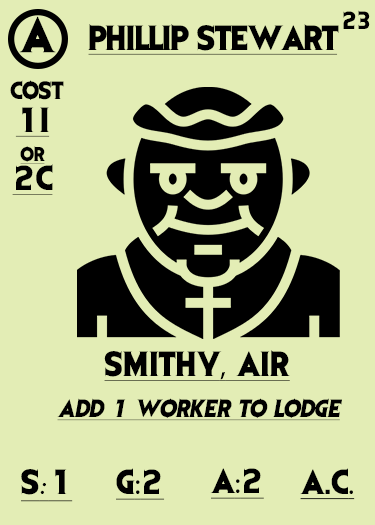
<style>
.page{position:relative;width:375px;height:525px;background:#e3edb5}
.page>*{position:absolute;margin:0}
.t1{font:41.7px "EvilDead";letter-spacing:-0.05em;color:#000000}
.t2{font:20.8px "EvilDead";letter-spacing:-0.1em;color:#000000}
.t3{font:29.2px "EvilDead";letter-spacing:-0.025em;color:#000000;text-decoration:underline}
.t4{font:20.8px "EvilDead";color:#000000}
.t5{font:29.2px/29.2px "EvilDead";color:#000000;text-decoration:underline}
.t6{font:16.7px/29.2px "EvilDead";color:#000000;text-decoration:underline}
.t7{font:29.2px "EvilDead";color:#000000;text-decoration:underline}
.t8{font:29.2px "MyriadPro-Regular";color:#000000;text-decoration:underline}
.t9{font:20.8px "EvilDead";color:#000000;font-style:italic;text-decoration:underline}
.t10{font:29.2px "Fadli-Script";color:#000000;text-decoration:underline}
</style>
<div class="page">
<p class="t1" style="left:19px;top:16px;width:37px;height:37px">A</p>
<p class="t2" style="left:343px;top:10px;width:27px;height:19px">23</p>
<p class="t3" style="left:88px;top:24px;width:251px;height:31px">Phillip Stewart</p>
<p class="t4" style="left:10px;top:80px;width:54px;height:20px">COST</p>
<p class="t5" style="left:12px;top:107px;width:41px;height:88px;text-align:center">1I<br><span class="t6">or<br></span>2C</p>
<p class="t7" style="left:104px;top:350px;width:186px;height:31px">SMITHY<span class="t8">,</span> AIR</p>
<p class="t9" style="left:57px;top:398px;width:285px;height:23px">Add 1 worker to lodge</p>
<p class="t7" style="left:21px;top:469px;width:52px;height:33px">S<span class="t10">:</span>1</p>
<p class="t7" style="left:116px;top:468px;width:49px;height:32px">G<span class="t8">:</span>2</p>
<p class="t7" style="left:210px;top:468px;width:54px;height:31px">A<span class="t8">:</span>2</p>
<p class="t7" style="left:300px;top:468px;width:55px;height:32px">A.C<span class="t8">.</span></p>
</div>
